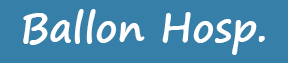
<style>
.page{position:relative;width:288px;height:63px;background:#367fa9}
.page>*{position:absolute;margin:0}
.t1{font:40px "SegoePrint-Bold";color:#ffffff}
</style>
<div class="page">
<p class="t1" style="left:23px;top:9px;width:242px;height:46px">Ballon Hosp.</p>
</div>
